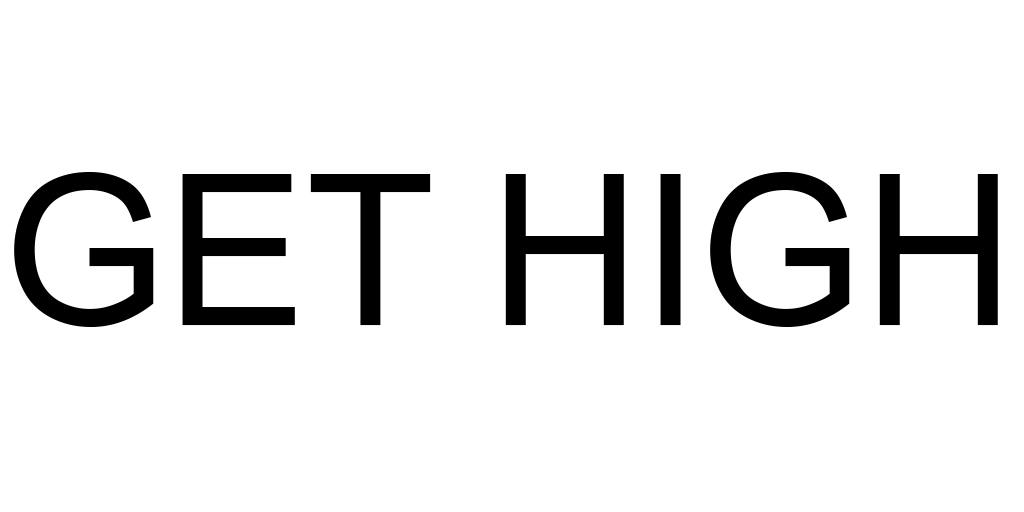
<style>
.page{position:relative;width:1024px;height:512px;background:#ffffff}
.page>*{position:absolute;margin:0}
.t1{font:210px "ArialMT";color:#000000}
</style>
<div class="page">
<p class="t1" style="left:14px;top:172px;width:984px;height:155px">GET HIGH</p>
</div>
